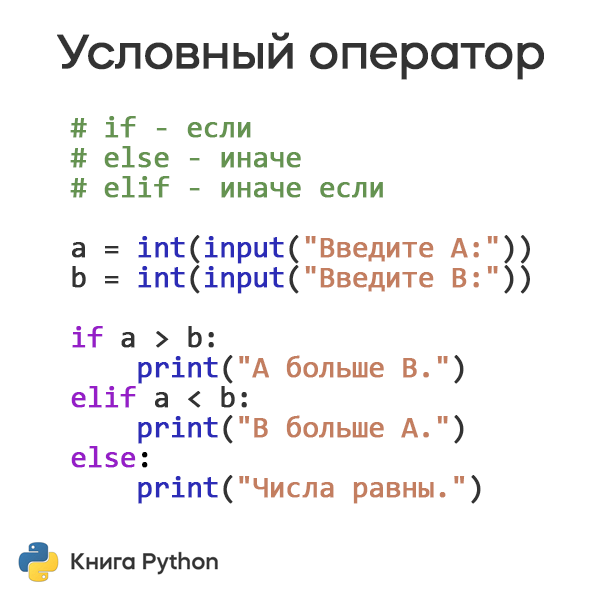
<style>
.page{position:relative;width:600px;height:600px;background:#ffffff}
.page>*{position:absolute;margin:0}
.t1{font:48px "MazzardH-Regular";letter-spacing:-0.025em;color:#333333;font-weight:bold}
.t2{font:30px/30px "Consolas";letter-spacing:-0.025em;color:#659351;font-weight:bold}
.t3{font:30px/30px "Consolas";letter-spacing:-0.025em;color:#333333;font-weight:bold}
.t4{font:30px/30px "Consolas";letter-spacing:-0.025em;color:#2c2cb7;font-weight:bold}
.t5{font:30px/30px "Consolas";letter-spacing:-0.025em;color:#c37e60;font-weight:bold}
.t6{font:30px/30px "Consolas";letter-spacing:-0.025em;color:#951ec7;font-weight:bold}
.t7{font:30px/30px "Consolas";letter-spacing:-0.025em;color:#000000;font-weight:bold}
</style>
<div class="page">
<p class="t1" style="left:57px;top:32px;width:487px;height:48px">Условный оператор</p>
<p class="t2" style="left:70px;top:116px;width:460px;height:388px"># if - если<br># else - иначе<br># elif - иначе если<br><br><span class="t3">a = </span><span class="t4">int</span><span class="t3">(</span><span class="t4">input</span><span class="t3">(</span><span class="t5">"Введите А:"</span><span class="t3">))<br>b = </span><span class="t4">int</span><span class="t3">(</span><span class="t4">input</span><span class="t3">(</span><span class="t5">"Введите B:"</span><span class="t3">))<br><br></span><span class="t6">if </span><span class="t3">a &gt; b:<br>    </span><span class="t4">print</span><span class="t3">(</span><span class="t5">"A больше B."</span><span class="t3">)<br></span><span class="t6">elif </span><span class="t3">a &lt; b:<br>    </span><span class="t4">print</span><span class="t3">(</span><span class="t5">"B больше A."</span><span class="t3">)<br></span><span class="t6">else</span><span class="t7">:<br>    </span><span class="t4">print</span><span class="t3">(</span><span class="t5">"Числа равны."</span><span class="t3">)</span></p>
</div>
